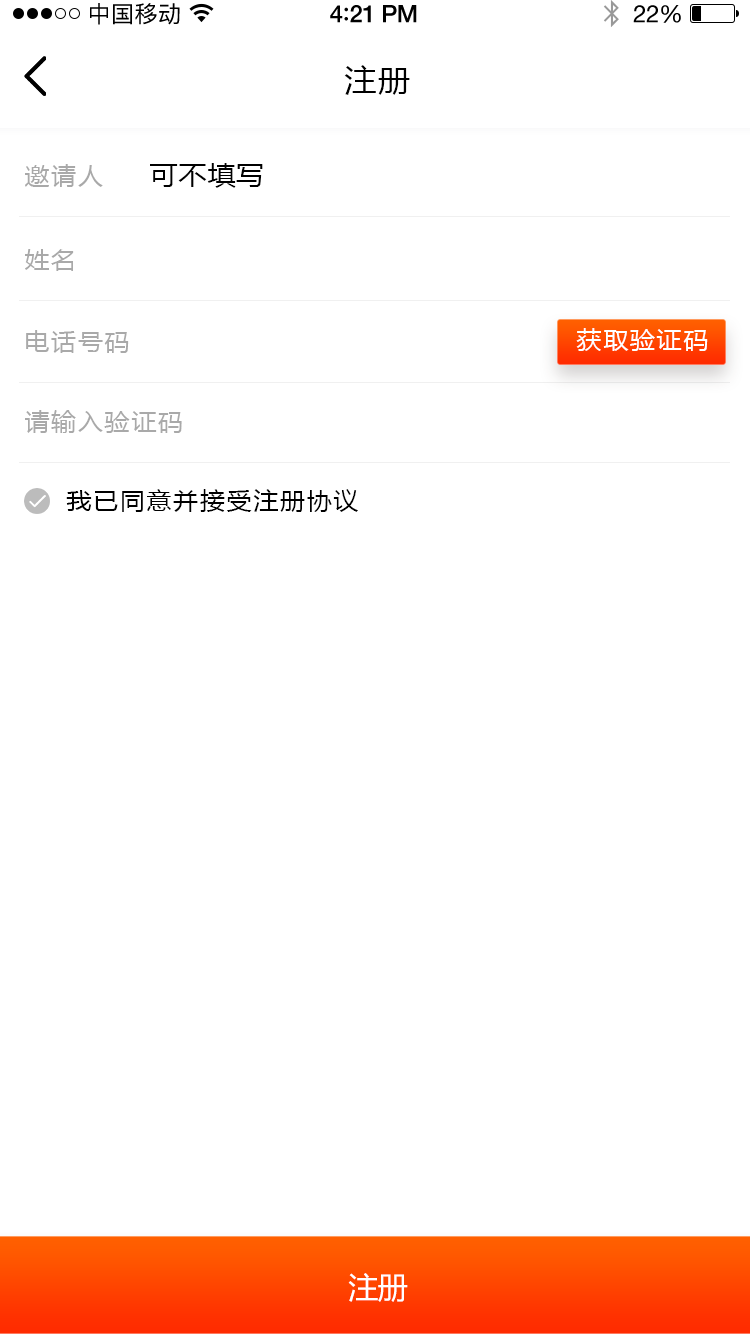
<style>
.page{position:relative;width:750px;height:1334px;background:#ffffff}
.page>*{position:absolute;margin:0}
.t1{font:23px "PingFangSC-Regular";letter-spacing:0.02em;color:#000000}
.t2{font:24px "HelveticaNeue-Medium";letter-spacing:-0.02em;color:#000000}
.t3{font:26px "Avenir-Medium";letter-spacing:-0.02em;color:#000000}
.t4{font:24px "HelveticaNeue";letter-spacing:-0.02em;color:#000000}
.t5{font:30px "MicrosoftYaHei";letter-spacing:0.05em;color:#000000;scale:1.06 1}
.t6{font:24px "MicrosoftYaHei";letter-spacing:0.05em;color:#a9a9a9;scale:1.06 1}
.t7{font:26px "MicrosoftYaHei";letter-spacing:0.05em;color:#000000;scale:1.06 1}
.t8{font:24px "MicrosoftYaHei";letter-spacing:0.05em;color:#ffffff;scale:1.06 1}
.t9{font:24px "MicrosoftYaHei";letter-spacing:0.05em;color:#000000;scale:1.06 1}
.t10{font:30px "MicrosoftYaHei";letter-spacing:-0.02em;color:#ffffff}
</style>
<div class="page">
<p class="t1" style="left:90px;top:3px;width:90px;height:22px">中国移动</p>
<p class="t2" style="left:330px;top:5px;width:87px;height:18px">4<span class="t3">:</span>21 PM</p>
<p class="t4" style="left:633px;top:5px;width:48px;height:18px">22%</p>
<p class="t5" style="left:344px;top:65px;width:66px;height:30px">注册</p>
<p class="t6" style="left:25px;top:164px;width:78px;height:23px">邀请人</p>
<p class="t7" style="left:150px;top:163px;width:113px;height:25px">可不填写</p>
<p class="t6" style="left:25px;top:249px;width:49px;height:22px">姓名</p>
<p class="t8" style="left:576px;top:328px;width:132px;height:23px">获取验证码</p>
<p class="t6" style="left:26px;top:330px;width:103px;height:23px">电话号码</p>
<p class="t6" style="left:25px;top:410px;width:157px;height:23px">请输入验证码</p>
<p class="t9" style="left:66px;top:489px;width:292px;height:23px">我已同意并接受注册协议</p>
<p class="t10" style="left:348px;top:1273px;width:60px;height:29px">注册</p>
</div>
